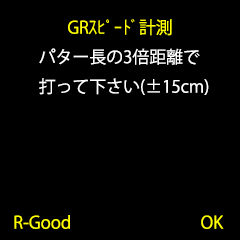
<style>
.page{position:relative;width:240px;height:240px;background:#000000}
.page>*{position:absolute;margin:0}
.t1{font:16.9px "KozGoPr6N-Regular";color:#ffff00}
.t2{font:16.9px "KozGoPr6N-Regular";color:#ffffff}
</style>
<div class="page">
<p class="t1" style="left:68px;top:19px;width:104px;height:17px">GRｽﾋﾟｰﾄﾞ計測</p>
<p class="t2" style="left:39px;top:48px;width:170px;height:47px">パター長の3倍距離で<br>打って下さい(±15cm)</p>
<p class="t1" style="left:14px;top:215px;width:56px;height:14px">R-Good</p>
<p class="t1" style="left:201px;top:215px;width:23px;height:14px">OK</p>
</div>
